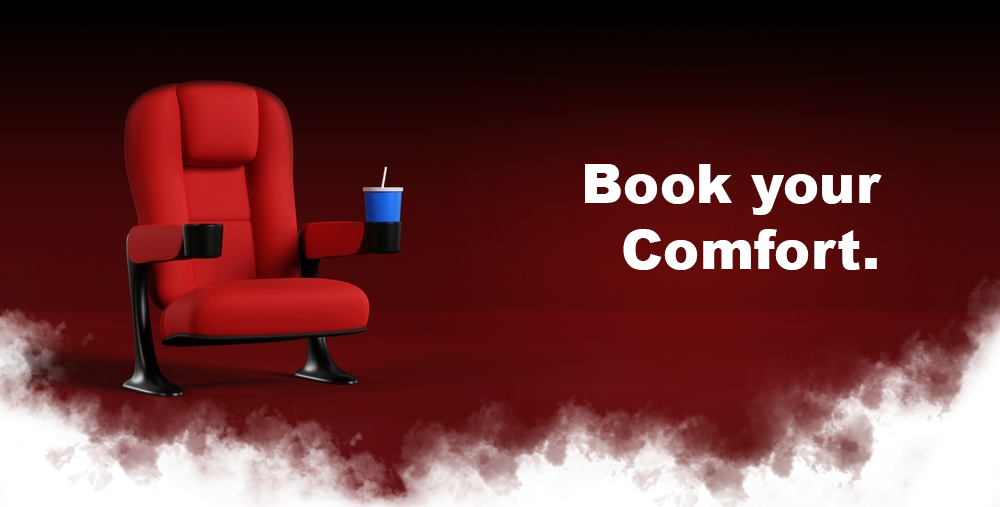
<style>
.page{position:relative;width:1000px;height:507px}
.page>*{position:absolute;margin:0}
.t1{font:54.5px "Arial-Black";color:#ffffff}
</style>
<div class="page">
<p class="t1" style="left:585px;top:164px;width:297px;height:106px;text-align:right">Book your<br>Comfort.</p>
</div>
